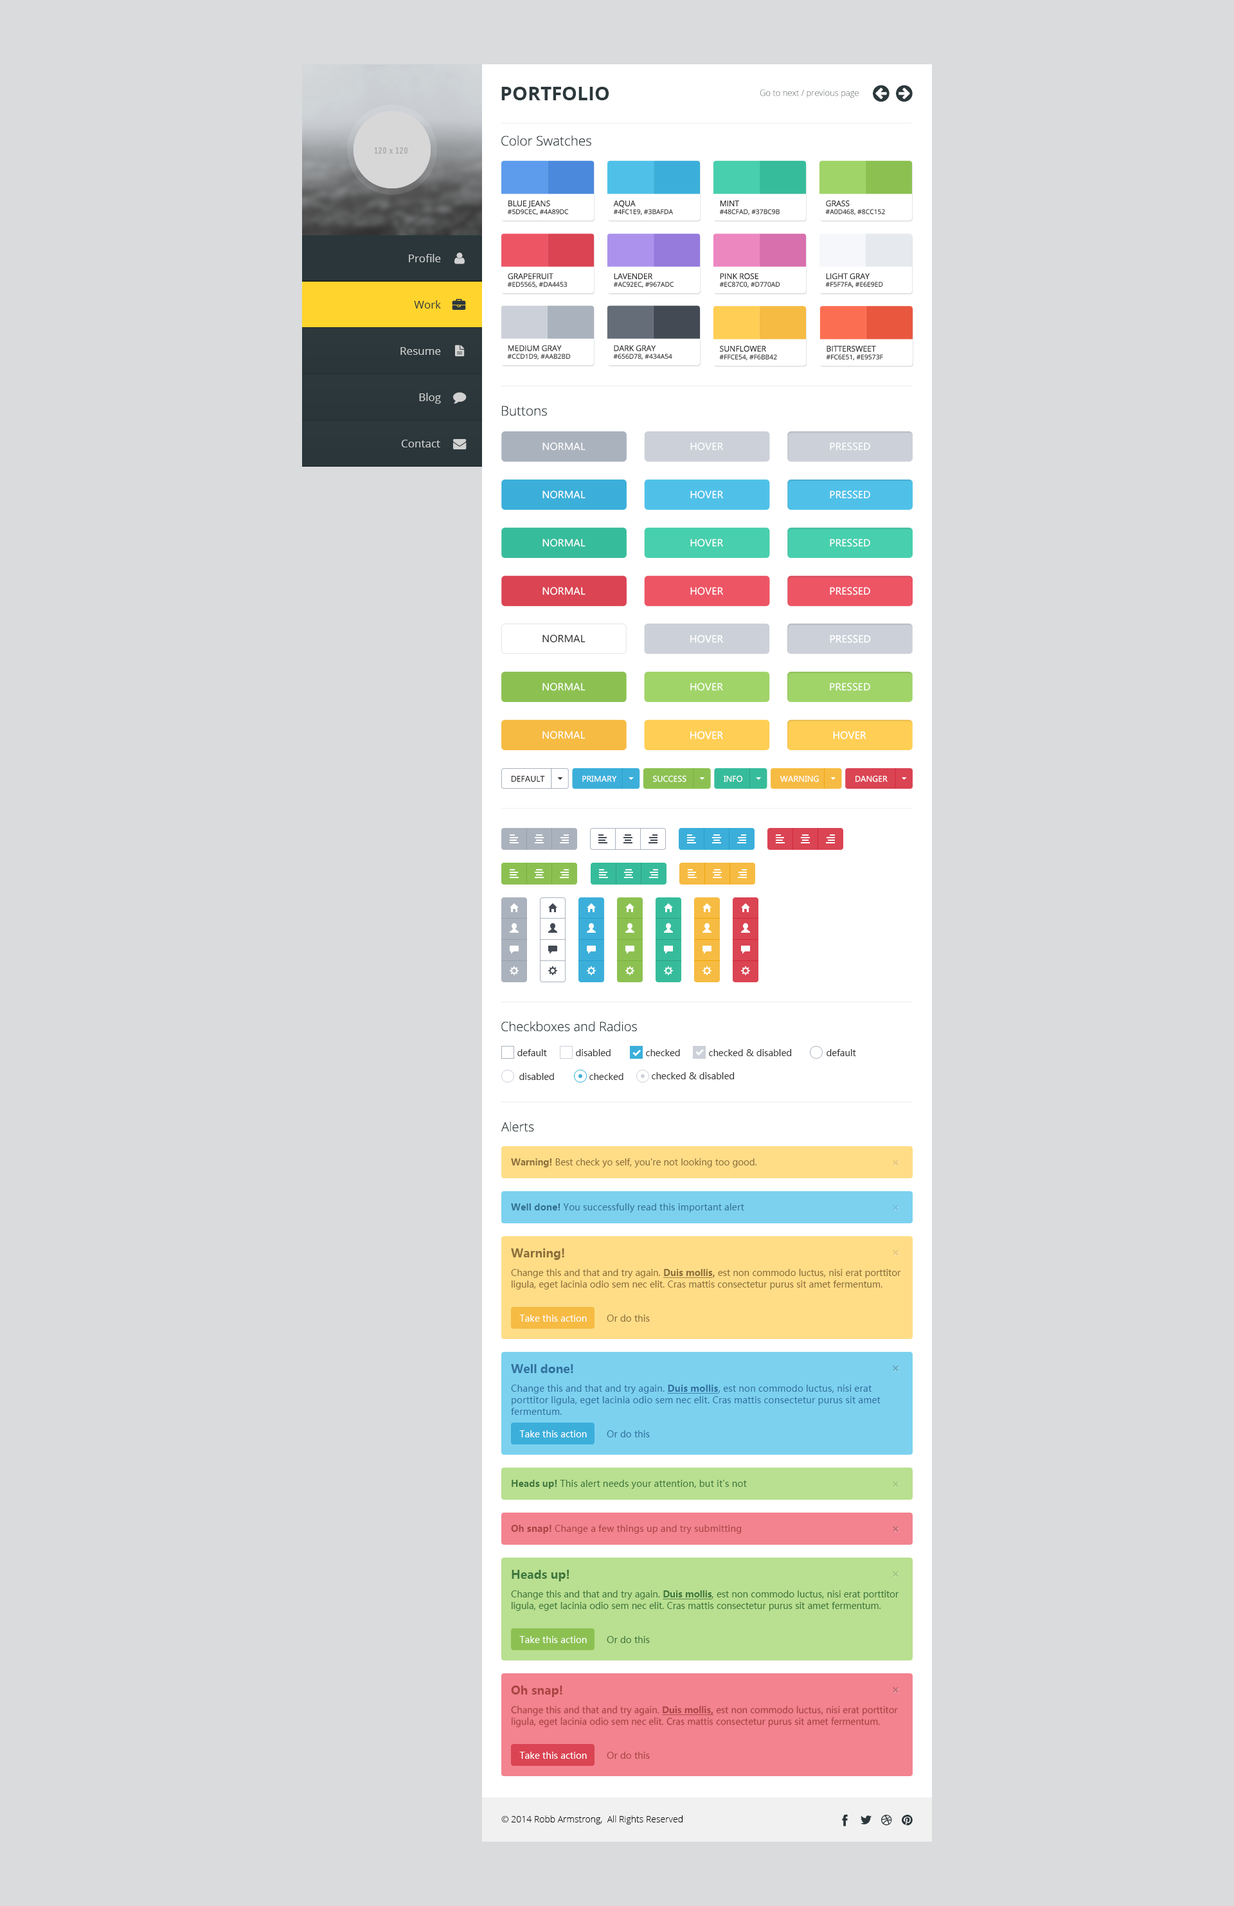
<style>
.page{position:relative;width:1234px;height:1906px;background:#d9dbdd}
.page>*{position:absolute;margin:0}
.t1{font:19.3px "OpenSans-Bold";color:#2c383c;text-transform:uppercase}
.t2{font:8.4px "OpenSans-Light"}
.t3{font:13.2px "OpenSans-Light";color:#2c383c}
.t4{font:6.6px "OpenSans";color:#333333}
.t5{font:7.9px "OpenSans";letter-spacing:-0.01em;color:#333333}
.t6{font:6.6px "OpenSans"}
.t7{font:10.9px "OpenSans";color:#d1d1d1}
.t8{font:10.9px "OpenSans";color:#2c383c}
.t9{font:9.6px "MicrosoftYaHei";color:#ffffff}
.t10{font:9.6px "MicrosoftYaHei";color:#333333}
.t11{font:9.6px "MicrosoftYaHei";color:#ffffff;text-transform:uppercase}
.t12{font:7.7px "MicrosoftYaHei";color:#333333}
.t13{font:7.7px "MicrosoftYaHei";color:#ffffff}
.t14{font:12.9px "OpenSans-Light";color:#2c383c}
.t15{font:9px "MicrosoftYaHei";letter-spacing:-0.01em;color:#333333}
.t16{font:9px "MicrosoftYaHei";color:#8a6d3b}
.t17{font:9px "MicrosoftYaHei-Bold";color:#8a6d3b}
.t18{font:9px "MicrosoftYaHei";color:#31708f}
.t19{font:9px "MicrosoftYaHei-Bold";color:#31708f}
.t20{font:11.6px "MicrosoftYaHei-Bold";color:#8a6d3b}
.t21{font:9px/11.6px "MicrosoftYaHei";color:#8a6d3b}
.t22{font:9px/11.6px "MicrosoftYaHei-Bold";color:#8a6d3b;text-decoration:underline}
.t23{font:9px/11.6px "MicrosoftYaHei-Bold";color:#8a6d3b}
.t24{font:9px "MicrosoftYaHei";color:#ffffff}
.t25{font:11.6px "MicrosoftYaHei-Bold";color:#31709e}
.t26{font:9px/11.6px "MicrosoftYaHei";color:#31709e}
.t27{font:9px/11.6px "MicrosoftYaHei-Bold";color:#31709e;text-decoration:underline}
.t28{font:9px "MicrosoftYaHei";color:#31709e}
.t29{font:9px "MicrosoftYaHei";color:#3c763d}
.t30{font:9px "MicrosoftYaHei-Bold";color:#3c763d}
.t31{font:9px "MicrosoftYaHei";color:#a94442}
.t32{font:9px "MicrosoftYaHei-Bold";color:#a94442}
.t33{font:11.6px "MicrosoftYaHei-Bold";color:#3c763d}
.t34{font:9px/11.6px "MicrosoftYaHei";color:#3c763d}
.t35{font:9px/11.6px "MicrosoftYaHei-Bold";color:#3c763d;text-decoration:underline}
.t36{font:11.6px "MicrosoftYaHei-Bold";color:#a94442}
.t37{font:9px/11.6px "MicrosoftYaHei";color:#a94442}
.t38{font:9px/11.6px "MicrosoftYaHei-Bold";color:#a94442;text-decoration:underline}
.t39{font:9px "OpenSans-Light";color:#000000}
</style>
<div class="page">
<p class="t1" style="left:501px;top:87px;width:108px;height:13px">Portfolio</p>
<p class="t2" style="left:760px;top:89px;width:99px;height:9px">Go to next / previous page</p>
<p class="t3" style="left:501px;top:135px;width:90px;height:11px">Color Swatches</p>
<p class="t4" style="left:507px;top:209px;width:62px;height:6px">#5D9CEC, #4A89DC</p>
<p class="t5" style="left:509px;top:200px;width:41px;height:8px">BLUE JEANS</p>
<p class="t5" style="left:613px;top:200px;width:23px;height:8px">AQUA</p>
<p class="t4" style="left:613px;top:209px;width:60px;height:6px">#4FC1E9, #3BAFDA</p>
<p class="t6" style="left:719px;top:209px;width:61px;height:6px">#48CFAD, #37BC9B</p>
<p class="t5" style="left:720px;top:201px;width:19px;height:5px">MINT</p>
<p class="t4" style="left:825px;top:209px;width:60px;height:6px">#A0D468, #8CC152</p>
<p class="t5" style="left:826px;top:200px;width:24px;height:6px">GRASS</p>
<p class="t7" style="left:409px;top:254px;width:32px;height:8px">Profile</p>
<p class="t4" style="left:507px;top:282px;width:61px;height:6px">#ED5565, #DA4453</p>
<p class="t5" style="left:508px;top:273px;width:46px;height:7px">GRAPEFRUIT</p>
<p class="t4" style="left:613px;top:282px;width:61px;height:6px">#AC92EC, #967ADC</p>
<p class="t5" style="left:614px;top:273px;width:39px;height:7px">LAVENDER</p>
<p class="t4" style="left:719px;top:282px;width:61px;height:6px">#EC87C0, #D770AD</p>
<p class="t5" style="left:720px;top:273px;width:39px;height:7px">PINK ROSE</p>
<p class="t4" style="left:825px;top:282px;width:58px;height:6px">#F5F7FA, #E6E9ED</p>
<p class="t5" style="left:826px;top:273px;width:44px;height:7px">LIGHT GRAY</p>
<p class="t8" style="left:414px;top:300px;width:27px;height:9px">Work</p>
<p class="t7" style="left:401px;top:347px;width:40px;height:8px">Resume</p>
<p class="t4" style="left:507px;top:354px;width:64px;height:6px">#CCD1D9, #AAB2BD</p>
<p class="t5" style="left:508px;top:345px;width:54px;height:7px">MEDIUM GRAY</p>
<p class="t6" style="left:613px;top:354px;width:59px;height:6px">#656D78, #434A54</p>
<p class="t5" style="left:614px;top:345px;width:42px;height:7px">DARK GRAY</p>
<p class="t5" style="left:720px;top:345px;width:46px;height:7px">SUNFLOWER</p>
<p class="t5" style="left:827px;top:345px;width:49px;height:7px">BITTERSWEET</p>
<p class="t4" style="left:719px;top:354px;width:58px;height:7px">#FFCE54, #F6BB42</p>
<p class="t4" style="left:826px;top:354px;width:57px;height:7px">#FC6E51, #E9573F</p>
<p class="t7" style="left:419px;top:393px;width:22px;height:11px">Blog</p>
<p class="t3" style="left:502px;top:406px;width:45px;height:10px">Buttons</p>
<p class="t7" style="left:401px;top:440px;width:39px;height:7px">Contact</p>
<p class="t9" style="left:543px;top:442px;width:43px;height:9px">NORMAL</p>
<p class="t9" style="left:690px;top:442px;width:34px;height:9px">HOVER</p>
<p class="t9" style="left:830px;top:442px;width:40px;height:9px">PRESSED</p>
<p class="t9" style="left:543px;top:491px;width:43px;height:8px">NORMAL</p>
<p class="t9" style="left:690px;top:491px;width:34px;height:8px">HOVER</p>
<p class="t9" style="left:830px;top:491px;width:40px;height:8px">PRESSED</p>
<p class="t9" style="left:543px;top:539px;width:43px;height:8px">NORMAL</p>
<p class="t9" style="left:690px;top:539px;width:34px;height:8px">HOVER</p>
<p class="t9" style="left:830px;top:539px;width:40px;height:8px">PRESSED</p>
<p class="t9" style="left:543px;top:587px;width:43px;height:8px">NORMAL</p>
<p class="t9" style="left:690px;top:587px;width:34px;height:8px">HOVER</p>
<p class="t9" style="left:830px;top:587px;width:40px;height:8px">PRESSED</p>
<p class="t10" style="left:543px;top:634px;width:43px;height:9px">NORMAL</p>
<p class="t9" style="left:690px;top:634px;width:34px;height:9px">HOVER</p>
<p class="t11" style="left:830px;top:634px;width:41px;height:9px">Pressed</p>
<p class="t9" style="left:543px;top:683px;width:43px;height:8px">NORMAL</p>
<p class="t9" style="left:690px;top:683px;width:33px;height:8px">HOVER</p>
<p class="t9" style="left:830px;top:683px;width:40px;height:8px">PRESSED</p>
<p class="t9" style="left:543px;top:731px;width:43px;height:8px">NORMAL</p>
<p class="t9" style="left:690px;top:731px;width:34px;height:8px">HOVER</p>
<p class="t9" style="left:833px;top:731px;width:34px;height:8px">HOVER</p>
<p class="t12" style="left:511px;top:775px;width:34px;height:7px">DEFAULT</p>
<p class="t13" style="left:582px;top:775px;width:35px;height:7px">PRIMARY</p>
<p class="t13" style="left:653px;top:775px;width:34px;height:7px">SUCCESS</p>
<p class="t13" style="left:724px;top:775px;width:19px;height:7px">INFO</p>
<p class="t13" style="left:780px;top:775px;width:39px;height:7px">WARNING</p>
<p class="t13" style="left:856px;top:775px;width:32px;height:7px">DANGER</p>
<p class="t14" style="left:501px;top:1021px;width:136px;height:11px">Checkboxes and Radios</p>
<p class="t15" style="left:518px;top:1049px;width:29px;height:7px">default</p>
<p class="t15" style="left:576px;top:1049px;width:35px;height:7px">disabled</p>
<p class="t15" style="left:646px;top:1049px;width:34px;height:7px">checked</p>
<p class="t15" style="left:709px;top:1049px;width:83px;height:7px">checked &amp; disabled</p>
<p class="t15" style="left:827px;top:1049px;width:29px;height:7px">default</p>
<p class="t15" style="left:519px;top:1073px;width:35px;height:7px">disabled</p>
<p class="t15" style="left:590px;top:1073px;width:34px;height:7px">checked</p>
<p class="t15" style="left:652px;top:1072px;width:83px;height:7px">checked &amp; disabled</p>
<p class="t14" style="left:501px;top:1121px;width:33px;height:11px">Alerts</p>
<p class="t16" style="left:511px;top:1158px;width:246px;height:9px"><span class="t17">Warning! </span>Best check yo self, you're not looking too good.</p>
<p class="t18" style="left:511px;top:1203px;width:233px;height:9px"><span class="t19">Well done! </span>You successfully read this important alert <span class="t19">message.</span></p>
<p class="t20" style="left:511px;top:1248px;width:53px;height:12px">Warning!</p>
<p class="t21" style="left:511px;top:1269px;width:390px;height:21px">Change this and that and try again. <span class="t22">Duis mollis</span><span class="t23">,</span> est non commodo luctus, nisi erat porttitor ligula, eget lacinia odio sem nec elit. Cras mattis consectetur purus sit amet fermentum.</p>
<p class="t24" style="left:519px;top:1315px;width:68px;height:7px">Take this action</p>
<p class="t16" style="left:607px;top:1315px;width:43px;height:7px">Or do this</p>
<p class="t25" style="left:511px;top:1364px;width:62px;height:9px">Well done!</p>
<p class="t26" style="left:511px;top:1385px;width:370px;height:30px">Change this and that and try again. <span class="t27">Duis mollis</span>, est non commodo luctus, nisi erat porttitor ligula, eget lacinia odio sem nec elit. Cras mattis consectetur purus sit amet fermentum.</p>
<p class="t24" style="left:519px;top:1430px;width:68px;height:7px">Take this action</p>
<p class="t28" style="left:607px;top:1430px;width:43px;height:7px">Or do this</p>
<p class="t29" style="left:512px;top:1480px;width:235px;height:9px"><span class="t30">Heads up! </span>This alert needs your attention, but it's not <span class="t30">super important.</span></p>
<p class="t31" style="left:511px;top:1525px;width:231px;height:9px"><span class="t32">Oh snap! </span>Change a few things up and try submitting <span class="t32">again.</span></p>
<p class="t33" style="left:512px;top:1570px;width:58px;height:11px">Heads up!</p>
<p class="t34" style="left:511px;top:1590px;width:388px;height:21px">Change this and that and try again. <span class="t35">Duis mollis</span>, est non commodo luctus, nisi erat porttitor ligula, eget lacinia odio sem nec elit. Cras mattis consectetur purus sit amet fermentum.</p>
<p class="t24" style="left:519px;top:1636px;width:68px;height:7px">Take this action</p>
<p class="t29" style="left:607px;top:1636px;width:43px;height:7px">Or do this</p>
<p class="t36" style="left:511px;top:1686px;width:51px;height:11px">Oh snap!</p>
<p class="t37" style="left:511px;top:1706px;width:387px;height:21px">Change this and that and try again. <span class="t38">Duis mollis,</span> est non commodo luctus, nisi erat porttitor ligula, eget lacinia odio sem nec elit. Cras mattis consectetur purus sit amet fermentum.</p>
<p class="t24" style="left:519px;top:1752px;width:68px;height:7px">Take this action</p>
<p class="t31" style="left:607px;top:1752px;width:43px;height:7px">Or do this</p>
<p class="t39" style="left:501px;top:1815px;width:182px;height:9px">© 2014 Robb Armstrong,  All Rights Reserved</p>
</div>
